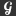
<style>
.page{position:relative;width:16px;height:16px;background:#333333}
.page>*{position:absolute;margin:0}
.t1{font:14px "Lobster1.4";color:#ffffff}
</style>
<div class="page">
<p class="t1" style="left:4px;top:1px;width:8px;height:14px">G</p>
</div>
